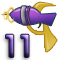
<style>
.page{position:relative;width:60px;height:60px;background:#ffffff}
.page>*{position:absolute;margin:0}
.t1{font:29.8px "BlippoLightSF";letter-spacing:-0.1em;font-weight:bold;scale:1.08 1}
</style>
<div class="page">
<p class="t1" style="left:6px;top:34px;width:23px;height:23px">11</p>
</div>
